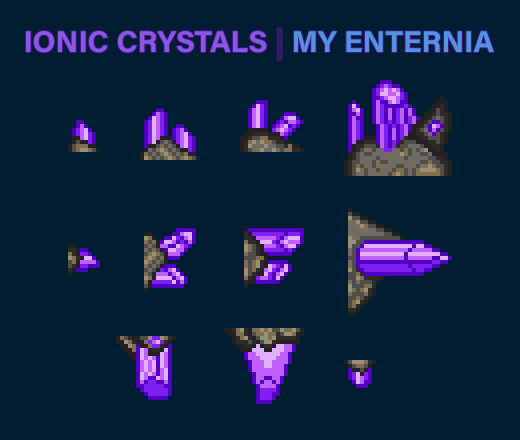
<style>
.page{position:relative;width:520px;height:440px;background:#001d32}
.page>*{position:absolute;margin:0}
.t1{font:30px "AcuminConcept-Bold";color:#8a56e3}
.t2{font:30px "AcuminConcept-Bold";color:#341863}
.t3{font:30px "AcuminConcept-Bold";color:#5692e3}
</style>
<div class="page">
<p class="t1" style="left:26px;top:28px;width:468px;height:32px">IONIC CRYSTALS <span class="t2">| </span><span class="t3">MY ENTERNIA</span></p>
</div>
